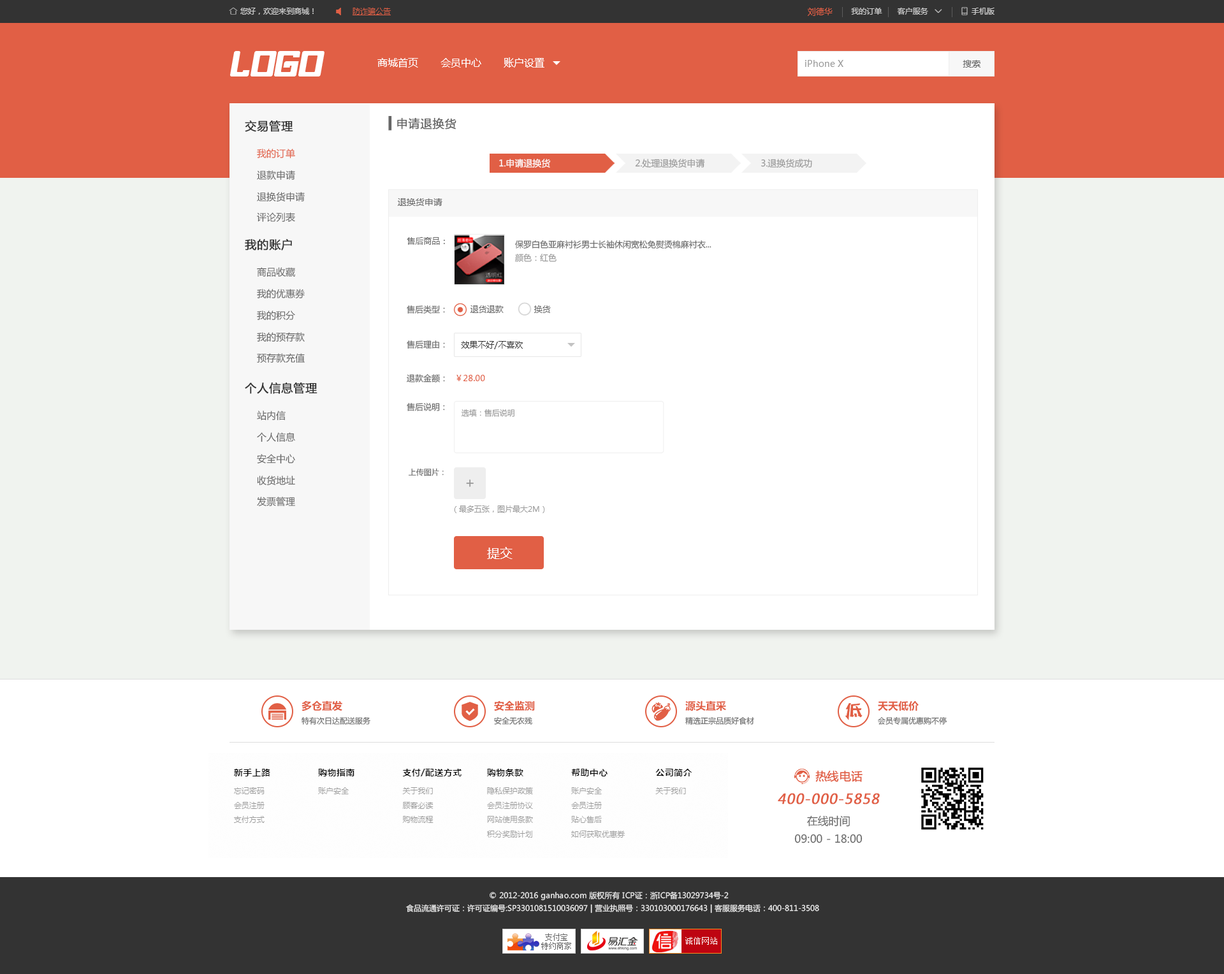
<style>
.page{position:relative;width:1224px;height:974px;background:#ffffff}
.page>*{position:absolute;margin:0}
.t1{font:8.3px "MicrosoftYaHei";color:#e15f45}
.t2{font:10.2px "MicrosoftYaHei";color:#ffffff}
.t3{font:8.9px "MicrosoftYaHei";color:#999999}
.t4{font:8.9px "MicrosoftYaHei";color:#666666}
.t5{font:11.5px "MicrosoftYaHei";color:#333333;font-weight:bold}
.t6{font:11.5px "MicrosoftYaHei";color:#666666;font-weight:bold}
.t7{font:9.6px "MicrosoftYaHei";color:#e15f45}
.t8{font:8.9px "MicrosoftYaHei";color:#fefefe}
.t9{font:9.6px "MicrosoftYaHei";color:#666666}
.t10{font:8.3px "MicrosoftYaHei";color:#666666}
.t11{font:8.3px "MicrosoftYaHei";color:#999999}
.t12{font:8.3px "MicrosoftYaHei";color:#333333}
.t13{font:7.7px "MicrosoftYaHei";color:#999999}
.t14{font:7.6px "MicrosoftYaHei";color:#666666}
.t15{font:14px "MicrosoftYaHei";color:#999999}
.t16{font:12.8px "MicrosoftYaHei";color:#ffffff}
.t17{font:10.2px "MicrosoftYaHei-Bold";color:#e15f45}
.t18{font:7.7px "MicrosoftYaHei";color:#666666}
.t19{font:11.5px "MicrosoftYaHei";color:#e15f45;font-weight:bold}
.t20{font:13.7px "MicrosoftYaHei";color:#e15f45;font-weight:bold;font-style:italic}
.t21{font:10.8px/17.8px "MicrosoftYaHei";color:#666666}
.t22{font:7.7px/12.8px "MicrosoftYaHei";color:#eeeeee}
</style>
<div class="page">
<p class="t1" style="left:808px;top:8px;width:25px;height:8px">刘德华</p>
<p class="t2" style="left:377px;top:57px;width:167px;height:11px">商城首页       会员中心       账户设置</p>
<p class="t3" style="left:805px;top:60px;width:38px;height:7px">iPhone X</p>
<p class="t4" style="left:963px;top:60px;width:18px;height:8px">搜索</p>
<p class="t5" style="left:245px;top:120px;width:48px;height:12px">交易管理</p>
<p class="t6" style="left:388px;top:116px;width:68px;height:15px">▍申请退换货</p>
<p class="t7" style="left:257px;top:149px;width:38px;height:10px">我的订单</p>
<p class="t8" style="left:499px;top:159px;width:52px;height:9px">1.申请退换货</p>
<p class="t3" style="left:635px;top:159px;width:70px;height:9px">2.处理退换货申请</p>
<p class="t3" style="left:761px;top:159px;width:51px;height:9px">3.退换货成功</p>
<p class="t9" style="left:257px;top:170px;width:38px;height:10px">退款申请</p>
<p class="t9" style="left:257px;top:192px;width:48px;height:10px">退换货申请</p>
<p class="t4" style="left:398px;top:198px;width:44px;height:8px">退换货申请</p>
<p class="t9" style="left:257px;top:212px;width:38px;height:10px">评论列表</p>
<p class="t5" style="left:245px;top:239px;width:47px;height:12px">我的账户</p>
<p class="t10" style="left:407px;top:237px;width:38px;height:8px">售后商品：</p>
<p class="t10" style="left:515px;top:240px;width:196px;height:9px">保罗白色亚麻衬衫男士长袖休闲宽松免熨烫棉麻衬衣...</p>
<p class="t11" style="left:515px;top:254px;width:42px;height:8px">颜色：红色</p>
<p class="t9" style="left:257px;top:267px;width:38px;height:10px">商品收藏</p>
<p class="t9" style="left:257px;top:289px;width:48px;height:9px">我的优惠券</p>
<p class="t10" style="left:407px;top:305px;width:38px;height:9px">售后类型：</p>
<p class="t10" style="left:471px;top:305px;width:80px;height:8px">退货退款            换货</p>
<p class="t9" style="left:257px;top:310px;width:38px;height:10px">我的积分</p>
<p class="t9" style="left:257px;top:332px;width:48px;height:10px">我的预存款</p>
<p class="t10" style="left:407px;top:340px;width:38px;height:9px">售后理由：</p>
<p class="t12" style="left:461px;top:341px;width:62px;height:8px">效果不好/不喜欢</p>
<p class="t9" style="left:257px;top:353px;width:48px;height:10px">预存款充值</p>
<p class="t10" style="left:407px;top:374px;width:38px;height:9px">退款金额：</p>
<p class="t1" style="left:456px;top:375px;width:29px;height:6px">￥28.00</p>
<p class="t5" style="left:245px;top:383px;width:72px;height:11px">个人信息管理</p>
<p class="t9" style="left:257px;top:411px;width:29px;height:10px">站内信</p>
<p class="t10" style="left:407px;top:403px;width:38px;height:8px">售后说明：</p>
<p class="t13" style="left:461px;top:409px;width:53px;height:8px">选填：售后说明</p>
<p class="t9" style="left:257px;top:432px;width:38px;height:10px">个人信息</p>
<p class="t9" style="left:257px;top:454px;width:38px;height:10px">安全中心</p>
<p class="t14" style="left:408px;top:468px;width:36px;height:8px">上传图片：</p>
<p class="t9" style="left:257px;top:476px;width:38px;height:10px">收货地址</p>
<p class="t15" style="left:466px;top:479px;width:8px;height:8px">+</p>
<p class="t9" style="left:257px;top:497px;width:38px;height:9px">发票管理</p>
<p class="t13" style="left:454px;top:506px;width:91px;height:7px">（最多五张，图片最大2M）</p>
<p class="t16" style="left:487px;top:547px;width:26px;height:12px">提交</p>
<p class="t17" style="left:302px;top:701px;width:40px;height:10px">多仓直发</p>
<p class="t17" style="left:494px;top:701px;width:41px;height:10px">安全监测</p>
<p class="t17" style="left:685px;top:701px;width:41px;height:10px">源头直采</p>
<p class="t17" style="left:878px;top:701px;width:41px;height:10px">天天低价</p>
<p class="t18" style="left:302px;top:717px;width:68px;height:8px">特有次日达配送服务</p>
<p class="t18" style="left:494px;top:717px;width:38px;height:8px">安全无农残</p>
<p class="t18" style="left:685px;top:717px;width:69px;height:8px">精选正宗品质好食材</p>
<p class="t18" style="left:878px;top:717px;width:69px;height:8px">会员专属优惠购不停</p>
<p class="t19" style="left:815px;top:771px;width:48px;height:11px">热线电话</p>
<p class="t20" style="left:778px;top:793px;width:102px;height:12px">400-000-5858</p>
<p class="t21" style="left:794px;top:815px;width:69px;height:28px;text-align:center">在线时间<br>09:00 - 18:00</p>
<p class="t22" style="left:406px;top:891px;width:413px;height:23px;text-align:center">© 2012-2016 ganhao.com 版权所有 ICP证：浙ICP备13029734号-2   <br>食品流通许可证：许可证编号:SP3301081510036097 | 营业执照号：330103000176643 | 客服服务电话：400-811-3508</p>
</div>
